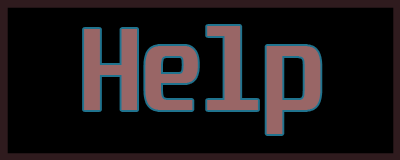
<style>
.page{position:relative;width:400px;height:160px;background:#000000}
.page>*{position:absolute;margin:0}
.t1{font:100px "Unispace-Bold";color:#996666}
</style>
<div class="page">
<p class="t1" style="left:84px;top:26px;width:237px;height:108px">Help</p>
</div>
